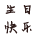
<style>
.page{position:relative;width:38px;height:38px;background:#ffffff}
.page>*{position:absolute;margin:0}
.t1{font:16px/18px "FZJLJW--GB1-0";color:#2e1b19;font-weight:bold}
</style>
<div class="page">
<p class="t1" style="left:4px;top:5px;width:28px;height:29px">生日<br>快乐</p>
</div>
